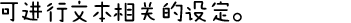
<style>
.page{position:relative;width:351px;height:23px;background:#ffffff}
.page>*{position:absolute;margin:0}
.t1{font:26px "¢è?";color:#000000}
</style>
<div class="page">
<p class="t1" style="left:0px;top:0px;width:242px;height:22px">可进行文本相关的设定。</p>
</div>
